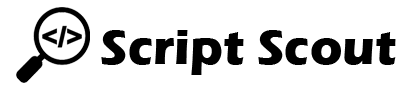
<style>
.page{position:relative;width:410px;height:94px;background:#ffffff}
.page>*{position:absolute;margin:0}
.t1{font:50px "ErasITC-Bold";color:#000000}
</style>
<div class="page">
<p class="t1" style="left:101px;top:30px;width:295px;height:45px">Script Scout</p>
</div>
